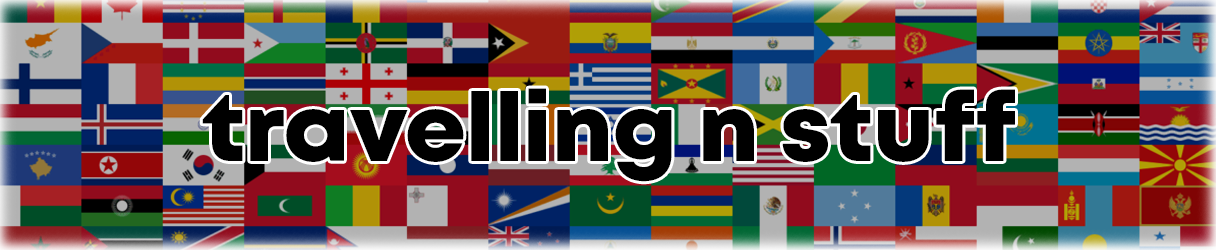
<style>
.page{position:relative;width:1216px;height:250px}
.page>*{position:absolute;margin:0}
.t1{font:95px "Mont-HeavyDEMO";color:#000000}
</style>
<div class="page">
<p class="t1" style="left:202px;top:88px;width:813px;height:94px">travelling n stuff</p>
</div>
